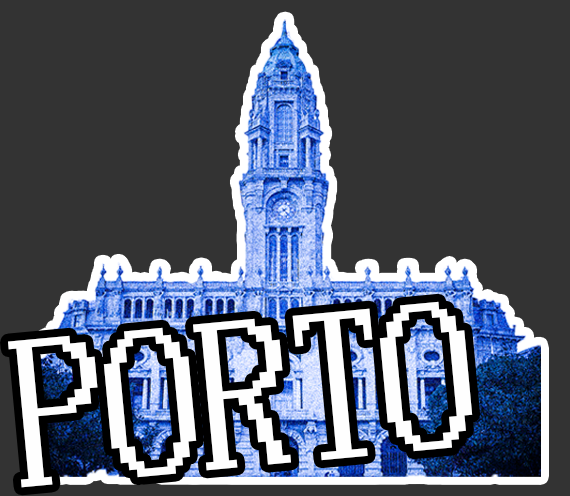
<style>
.page{position:relative;width:570px;height:496px;background:#333333}
.page>*{position:absolute;margin:0}
.t1{font:184.9px "Px437_DOS-V_re._ANK24";color:#fefefe}
</style>
<div class="page">
<p class="t1" style="left:8px;top:301px;width:465px;height:187px;rotate:-5deg">PORTO</p>
</div>
